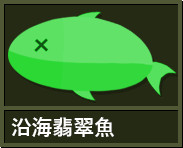
<style>
.page{position:relative;width:183px;height:148px;background:#242a14}
.page>*{position:absolute;margin:0}
.t1{font:20.8px "YuGothicUI-Semibold";color:#ffffff}
</style>
<div class="page">
<p class="t1" style="left:11px;top:117px;width:103px;height:20px">沿海翡翠魚</p>
</div>
